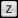
<style>
.page{position:relative;width:18px;height:18px}
.page>*{position:absolute;margin:0}
.t1{font:11px "MyriadPro-Regular"}
</style>
<div class="page">
<p class="t1" style="left:6px;top:5px;width:6px;height:8px">Z</p>
</div>
